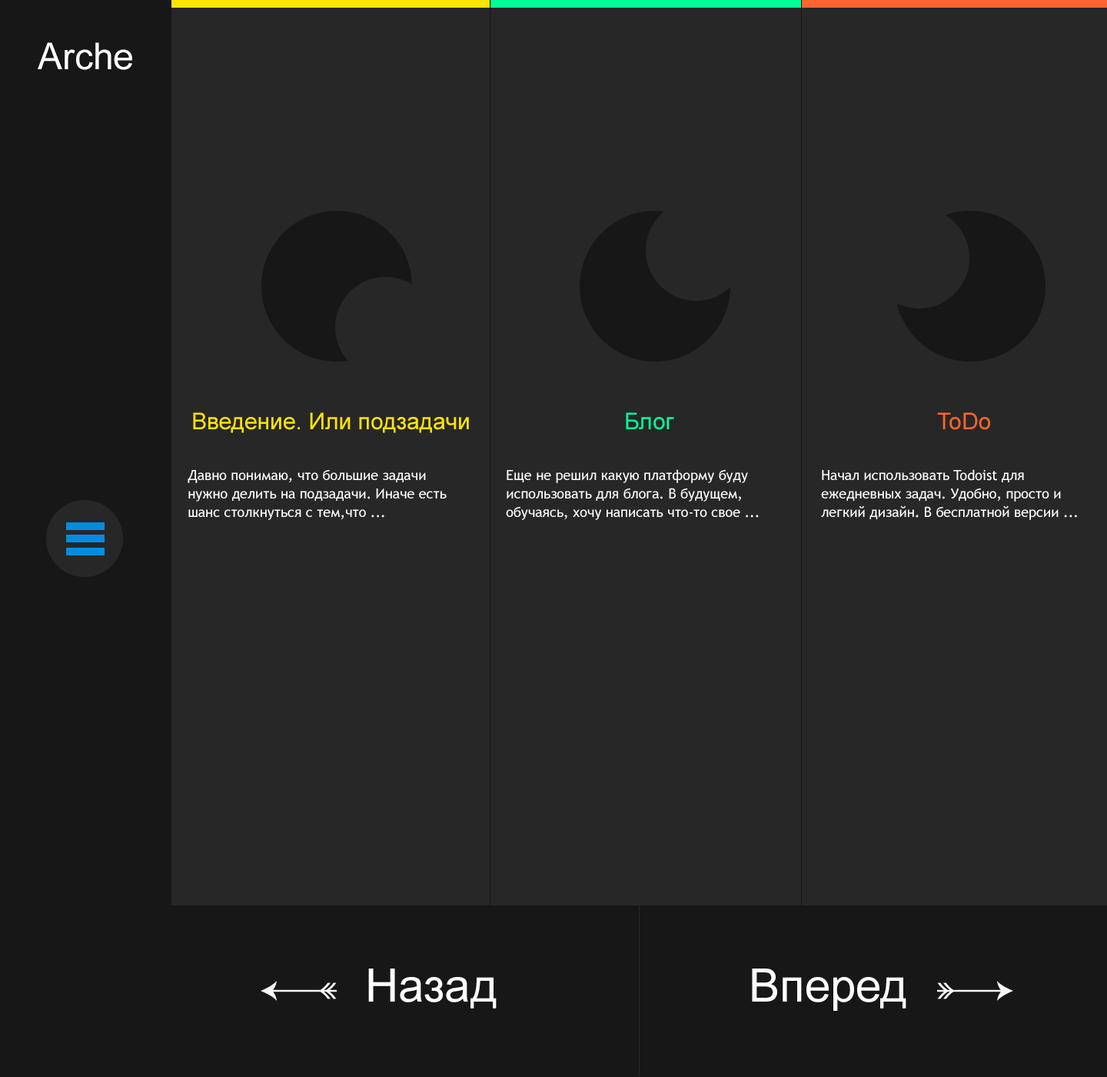
<style>
.page{position:relative;width:1107px;height:1077px;background:#272727}
.page>*{position:absolute;margin:0}
.t1{font:36.9px "ArialMT";color:#ffffff}
.t2{font:23.1px "ArialMT";color:#ffe400}
.t3{font:23.1px "ArialMT";color:#00ff99}
.t4{font:23.1px "ArialMT";color:#ff652f}
.t5{font:13.8px/18.5px "TrebuchetMS";color:#ffffff}
.t6{font:46.1px "ArialMT";color:#ffffff}
</style>
<div class="page">
<p class="t1" style="left:38px;top:42px;width:94px;height:28px">Arche</p>
<p class="t2" style="left:193px;top:412px;width:276px;height:21px">Введение. Или подзадачи</p>
<p class="t3" style="left:626px;top:412px;width:48px;height:18px">Блог</p>
<p class="t4" style="left:938px;top:412px;width:53px;height:18px">ToDo</p>
<p class="t5" style="left:188px;top:469px;width:259px;height:51px">Давно понимаю, что большие задачи нужно делить на подзадачи. Иначе есть шанс столкнуться с тем,что ...</p>
<p class="t5" style="left:506px;top:469px;width:253px;height:51px">Еще не решил какую платформу буду использовать для блога. В будущем, обучаясь, хочу написать что-то свое ...</p>
<p class="t5" style="left:821px;top:469px;width:256px;height:51px">Начал использовать Todoist для ежедневных задач. Удобно, просто и легкий дизайн. В бесплатной версии ...</p>
<p class="t6" style="left:368px;top:968px;width:129px;height:40px">Назад</p>
<p class="t6" style="left:752px;top:968px;width:155px;height:43px">Вперед</p>
</div>
